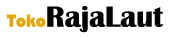
<style>
.page{position:relative;width:170px;height:37px;background:#ffffff}
.page>*{position:absolute;margin:0}
.t1{font:30px "BritannicBold";color:#030201}
.t2{font:18px "Bauhaus93";color:#e3a80b}
</style>
<div class="page">
<p class="t1" style="left:6px;top:6px;width:157px;height:27px"><span class="t2">Toko</span>RajaLaut</p>
</div>
